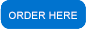
<style>
.page{position:relative;width:86px;height:29px;background:#0073cf}
.page>*{position:absolute;margin:0}
.t1{font:10px "ArialMT";letter-spacing:0.025em;color:#ffffff}
</style>
<div class="page">
<p class="t1" style="left:9px;top:11px;width:68px;height:8px">ORDER HERE</p>
</div>
